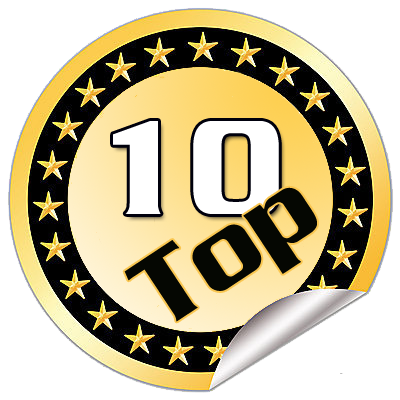
<style>
.page{position:relative;width:400px;height:400px;background:#ffffff}
.page>*{position:absolute;margin:0}
.t1{font:200px "PSLKampanath";color:#ffffff}
.t2{font:150px "PSLKampanath";color:#050702}
</style>
<div class="page">
<p class="t1" style="left:113px;top:121px;width:166px;height:93px">10</p>
<p class="t2" style="left:124px;top:187px;width:193px;height:135px;rotate:-33deg">Top</p>
</div>
